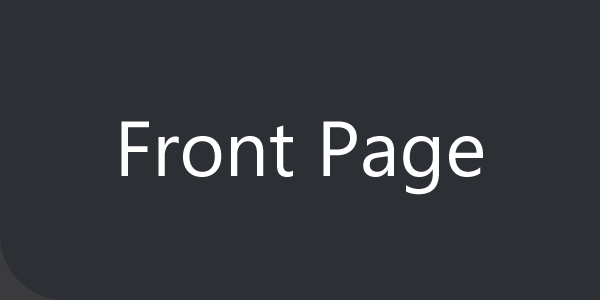
<style>
.page{position:relative;width:600px;height:300px;background:#2c2f33}
.page>*{position:absolute;margin:0}
.t1{font:133.3px "LaoUI";color:#ffffff}
</style>
<div class="page">
<p class="t1" style="left:121px;top:121px;width:362px;height:74px">Front Page</p>
</div>
